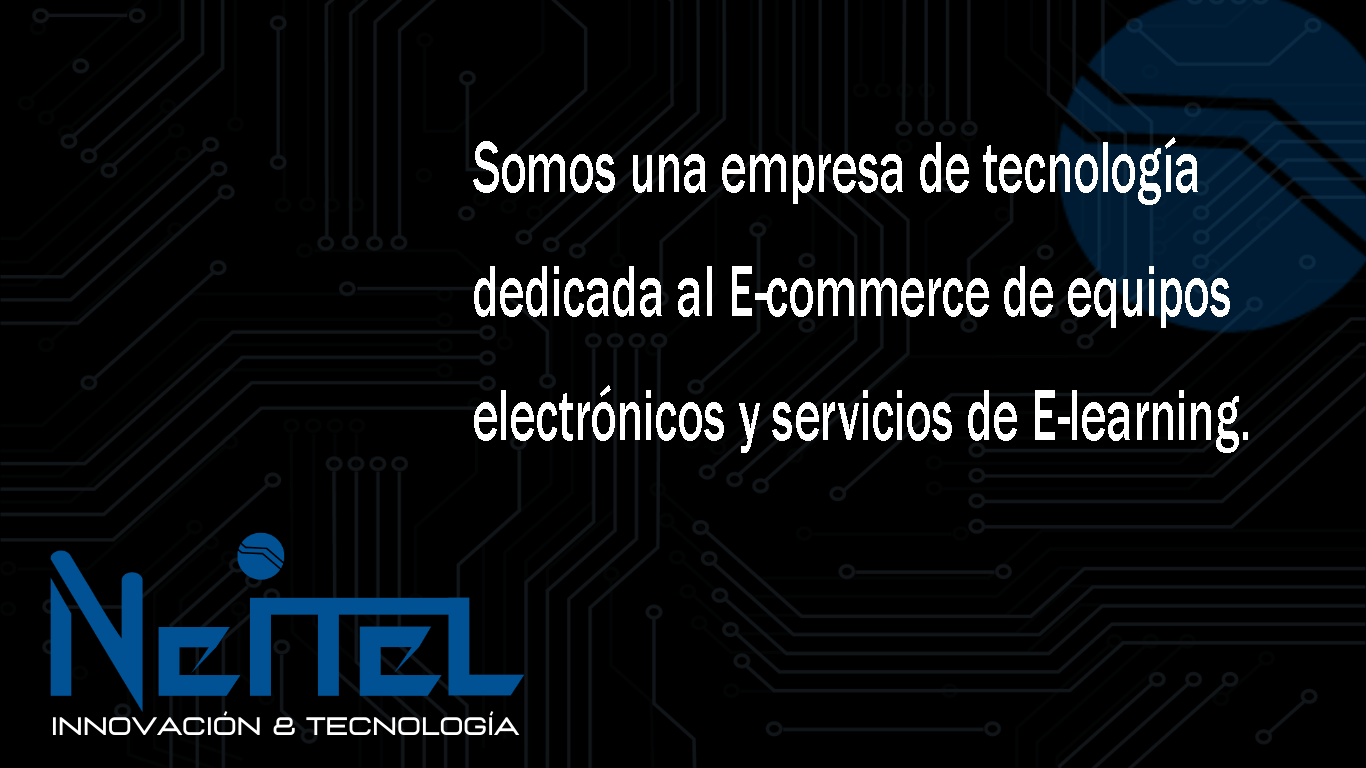
<style>
.page{position:relative;width:1366px;height:768px;background:#000000}
.page>*{position:absolute;margin:0}
.t1{font:74.5px/124.2px "FranklinGothic-Medium";color:#ffffff;scale:0.66 1}
</style>
<div class="page">
<p class="t1" style="left:473px;top:137px;width:775px;height:316px">Somos una empresa de tecnología<br>dedicada al E-commerce de equipos<br>electrónicos y servicios de E-learning.</p>
</div>
